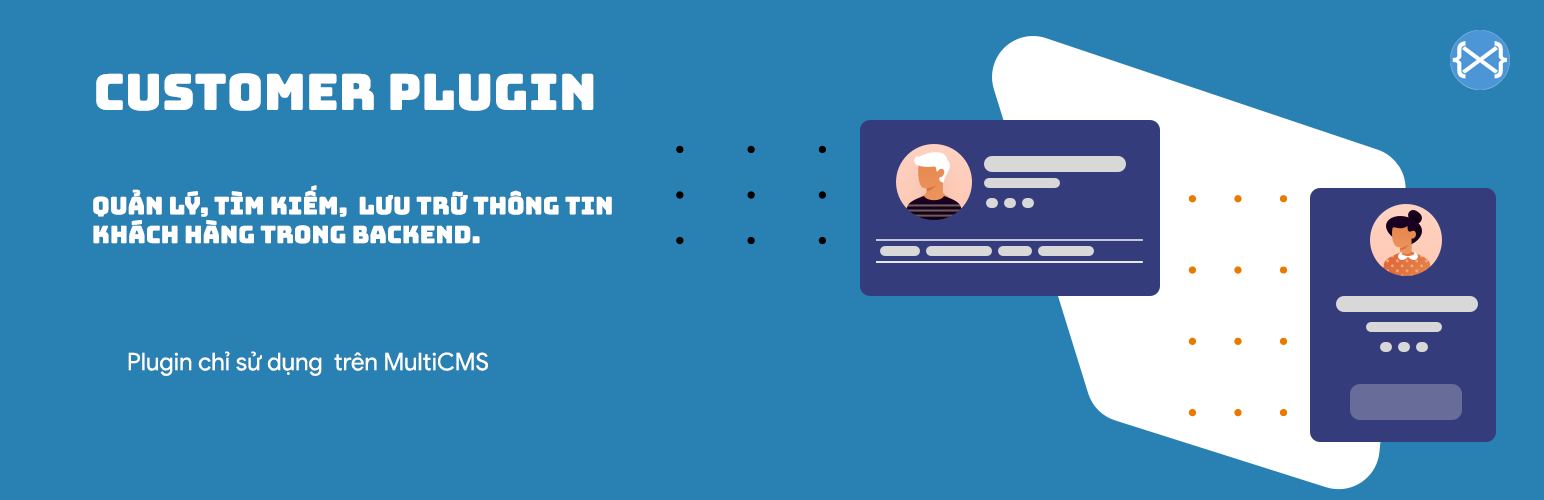
<style>
.page{position:relative;width:1544px;height:500px;background:#2981b3}
.page>*{position:absolute;margin:0}
.t1{font:50px "Bungee-Regular";color:#ffffff}
.t2{font:24px "Bungee-Regular";color:#ffffff}
.t3{font:24px "GoogleSans-Regular";color:#ffffff}
</style>
<div class="page">
<p class="t1" style="left:96px;top:73px;width:498px;height:38px">CUSTOMER PLUGIN</p>
<p class="t2" style="left:93px;top:185px;width:519px;height:59px">Quản lý, tìm kiếm,  lưu trữ thông tin<br>khách hàng trong Backend.</p>
<p class="t3" style="left:128px;top:351px;width:360px;height:25px">Plugin chỉ sử dụng  trên MultiCMS</p>
</div>
